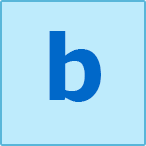
<style>
.page{position:relative;width:146px;height:146px;background:#beebfc}
.page>*{position:absolute;margin:0}
.t1{font:90px "Verdana-Bold";color:#0068c9}
</style>
<div class="page">
<p class="t1" style="left:49px;top:31px;width:52px;height:71px">b</p>
</div>
